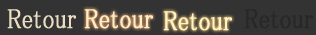
<style>
.page{position:relative;width:316px;height:35px;background:#333333}
.page>*{position:absolute;margin:0}
.t1{font:27.9px "MS-PMincho";color:#ebdcc3;font-weight:bold;scale:0.84 1}
.t2{font:27.9px "MS-PMincho";color:#feedc8;font-weight:bold;scale:0.84 1}
.t3{font:27.9px "MS-PMincho";color:#fef3ca;font-weight:bold;scale:0.84 1}
.t4{font:27.9px "MS-PMincho";color:#272727;font-weight:bold;scale:0.84 1}
</style>
<div class="page">
<p class="t1" style="left:7px;top:9px;width:69px;height:20px">Retour</p>
<p class="t2" style="left:84px;top:9px;width:69px;height:20px">Retour</p>
<p class="t3" style="left:163px;top:11px;width:69px;height:20px">Retour</p>
<p class="t4" style="left:244px;top:9px;width:69px;height:20px">Retour</p>
</div>
